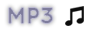
<style>
.page{position:relative;width:96px;height:32px;background:#ffffff}
.page>*{position:absolute;margin:0}
.t1{font:24px "ElyRounded-Heavy"}
</style>
<div class="page">
<p class="t1" style="left:8px;top:7px;width:46px;height:17px">MP3</p>
</div>
